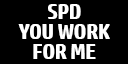
<style>
.page{position:relative;width:128px;height:64px;background:#000000}
.page>*{position:absolute;margin:0}
.t1{font:20.7px/19.7px "HPSimplified-Bold";letter-spacing:-0.01em;color:#ffffff}
</style>
<div class="page">
<p class="t1" style="left:18px;top:4px;width:92px;height:55px;text-align:center">SPD<br>YOU WORK<br>FOR ME</p>
</div>
